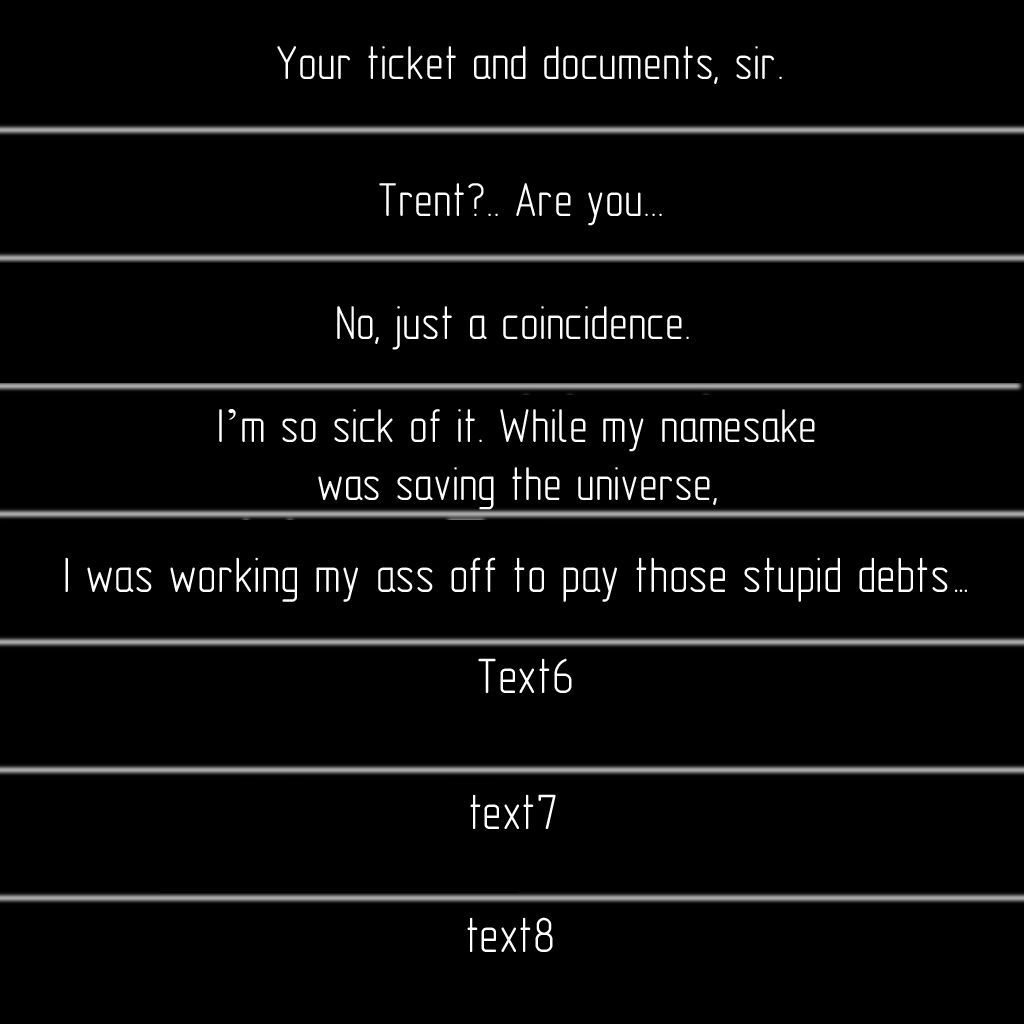
<style>
.page{position:relative;width:1024px;height:1024px;background:#000000}
.page>*{position:absolute;margin:0}
.t1{font:48px "GOST-2.304-81typeA";color:#ffffff}
.t2{font:48px "TimesNewRomanPSMT";color:#ffffff}
.t3{font:50px "GOST-2.304-81typeA";color:#ffffff}
</style>
<div class="page">
<p class="t1" style="left:277px;top:46px;width:505px;height:38px">Your ticket and documents, sir.</p>
<p class="t1" style="left:379px;top:183px;width:283px;height:43px">Trent?.. Are you...</p>
<p class="t1" style="left:337px;top:306px;width:352px;height:44px">No, just a coincidence.</p>
<p class="t1" style="left:219px;top:409px;width:596px;height:101px;text-align:center">I<span class="t2">’</span>m so sick of it. While my namesake<br>was saving the universe,</p>
<p class="t3" style="left:65px;top:557px;width:902px;height:45px">I was working my ass off to pay those stupid debts…</p>
<p class="t3" style="left:478px;top:658px;width:94px;height:35px">Text6</p>
<p class="t3" style="left:470px;top:794px;width:86px;height:35px">text7</p>
<p class="t3" style="left:467px;top:917px;width:86px;height:35px">text8</p>
</div>
